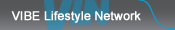
<style>
.page{position:relative;width:175px;height:30px}
.page>*{position:absolute;margin:0}
.t1{font:12px "ArialMT";color:#ffffff;font-weight:bold}
</style>
<div class="page">
<p class="t1" style="left:11px;top:11px;width:130px;height:12px">VIBE Lifestyle Network</p>
</div>
